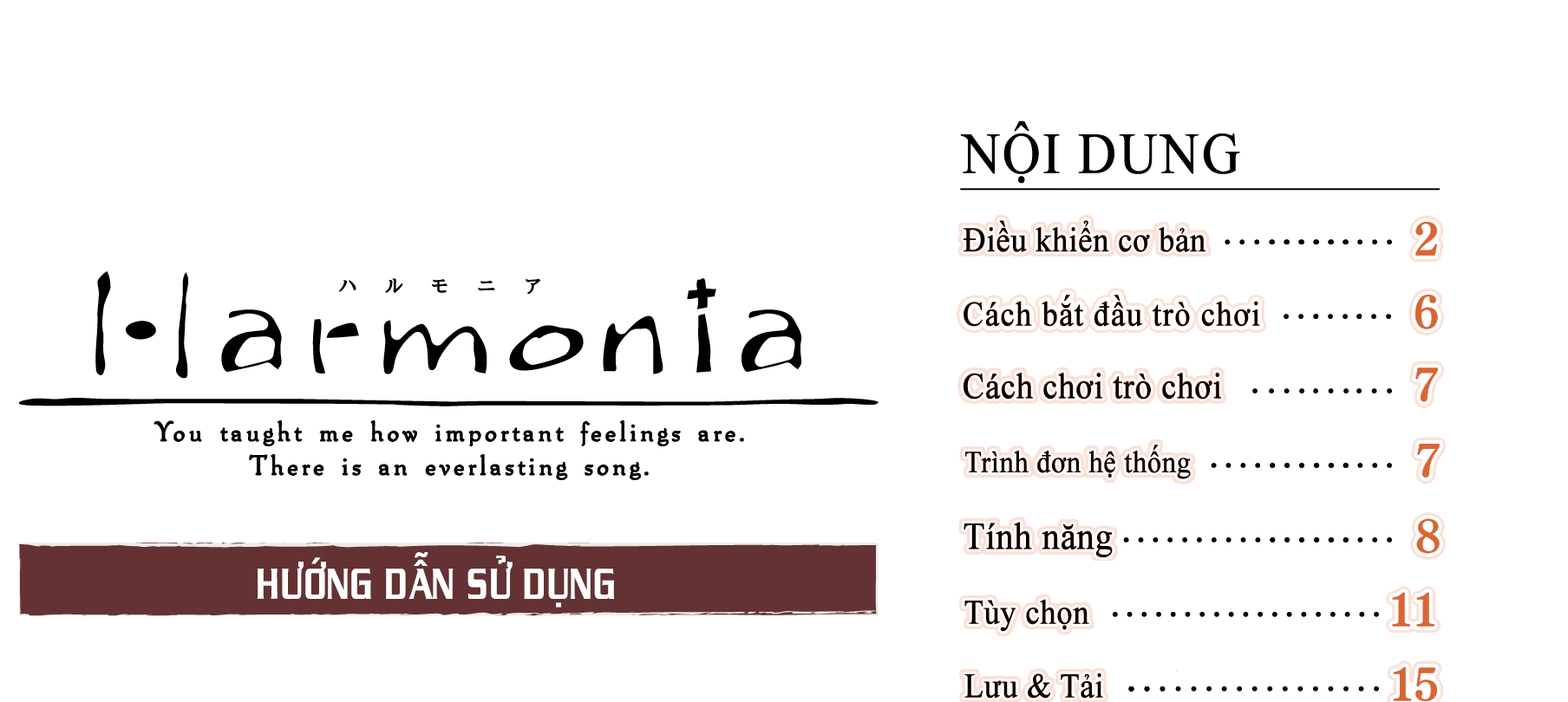
<style>
.page{position:relative;width:1568px;height:702px;background:#ffffff}
.page>*{position:absolute;margin:0}
.t1{font:57.9px "TimesNewRomanPSMT";color:#000000;text-transform:uppercase;font-weight:bold;scale:0.91 1}
.t2{font:34.3px "TimesNewRomanPSMT";color:#000000;font-weight:bold;scale:0.91 1}
.t3{font:34.3px "TimesNewRomanPSMT";letter-spacing:0.02em;color:#000000;font-weight:bold;scale:0.91 1}
.t4{font:36.3px "TimesNewRomanPSMT";color:#000000;font-weight:bold;scale:0.91 1}
.t5{font:30.5px "TimesNewRomanPSMT";color:#000000;font-weight:bold;scale:0.91 1}
.t6{font:38.2px "TimesNewRomanPSMT";color:#000000;font-weight:bold;scale:0.91 1}
.t7{font:48.2px "MTOChaney";color:#ffffff;text-transform:uppercase;scale:0.91 1}
</style>
<div class="page">
<p class="t1" style="left:961px;top:121px;width:279px;height:63px">Nội dung</p>
<p class="t2" style="left:963px;top:220px;width:243px;height:32px">Điều khiển cơ bản</p>
<p class="t3" style="left:964px;top:295px;width:296px;height:32px">Cách bắt đầu trò chơi</p>
<p class="t4" style="left:964px;top:373px;width:258px;height:27px">Cách chơi trò chơi</p>
<p class="t5" style="left:965px;top:445px;width:226px;height:35px">Trình đơn hệ thống</p>
<p class="t6" style="left:964px;top:522px;width:149px;height:36px">Tính năng</p>
<p class="t7" style="left:257px;top:552px;width:358px;height:56px">Hướng dẫn sử dụng</p>
<p class="t2" style="left:964px;top:599px;width:125px;height:33px">Tùy chọn</p>
<p class="t2" style="left:964px;top:673px;width:139px;height:26px">Lưu &amp; Tải</p>
</div>
